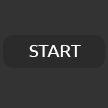
<style>
.page{position:relative;width:108px;height:108px;background:#333333}
.page>*{position:absolute;margin:0}
.t1{font:18px "Ubuntu";color:#ffffff}
</style>
<div class="page">
<p class="t1" style="left:29px;top:45px;width:52px;height:12px">START</p>
</div>
